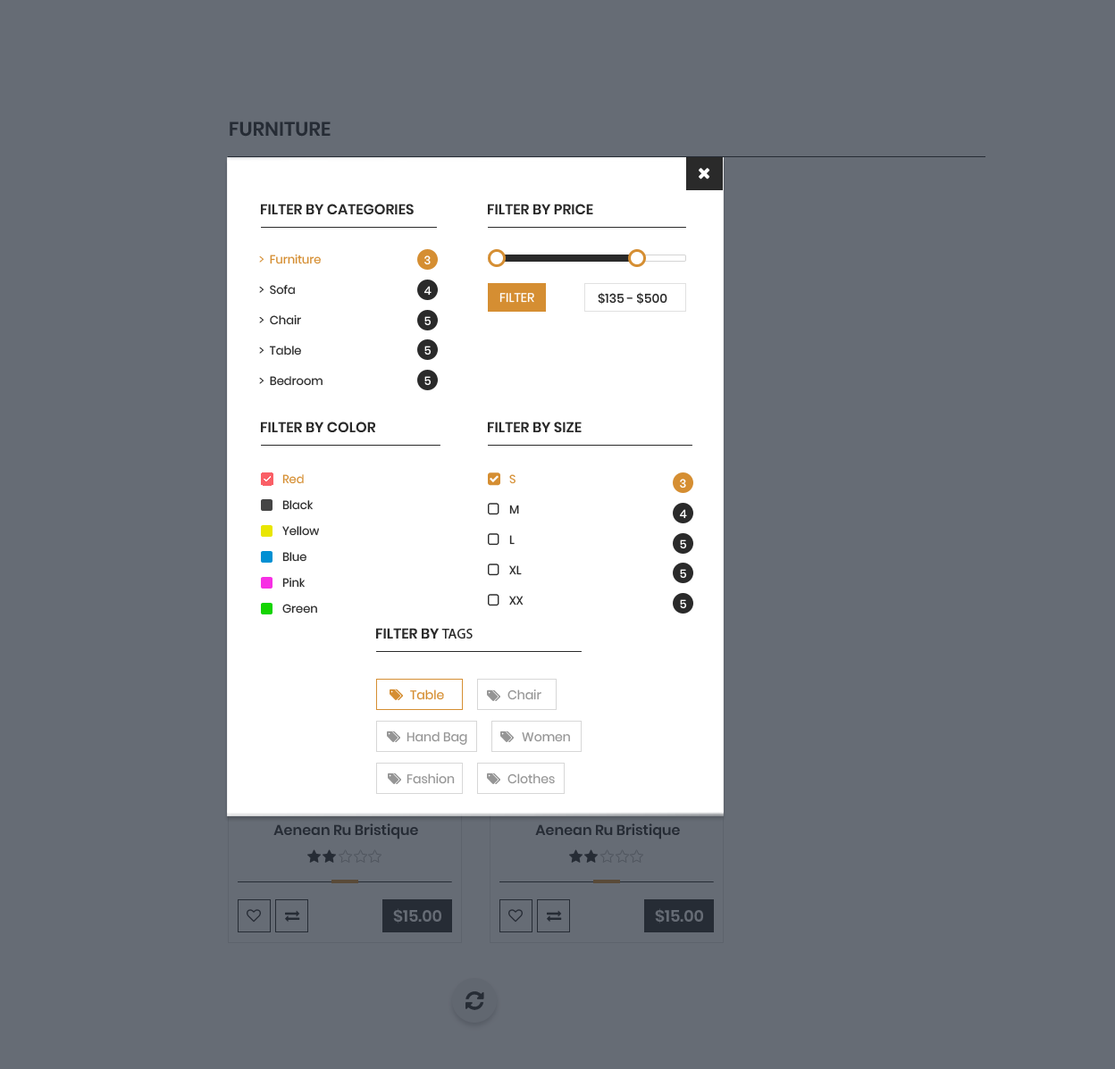
<style>
.page{position:relative;width:1115px;height:1069px;background:#666c75}
.page>*{position:absolute;margin:0}
.t1{font:19.7px "Poppins-SemiBold";color:#2a2a2a;text-transform:uppercase}
.t2{font:14.3px "Poppins-SemiBold";color:#2a2a2a;text-transform:uppercase}
.t3{font:11.6px/30.4px "Poppins-Regular";color:#2a2a2a}
.t4{font:11.6px/30.4px "Poppins-Regular";color:#d58e32}
.t5{font:11.6px "Poppins-Medium";color:#ffffff}
.t6{font:12.5px "Poppins-Regular";color:#ffffff;text-transform:uppercase}
.t7{font:12.5px "Poppins-Medium";color:#2a2a2a}
.t8{font:11.6px/25.9px "Poppins-Regular";color:#2a2a2a}
.t9{font:11.6px/25.9px "Poppins-Regular";color:#d58e32}
.t10{font:14.3px "MyriadPro-Regular";color:#2a2a2a;text-transform:uppercase}
.t11{font:12.5px "Poppins-Regular";color:#d58e32}
.t12{font:12.5px "Poppins-Regular";color:#959595}
.t13{font:14.3px "Poppins-SemiBold";color:#2a2a2a}
.t14{font:16.1px "Poppins-SemiBold";color:#666c75}
</style>
<div class="page">
<p class="t1" style="left:230px;top:122px;width:101px;height:15px">furniture</p>
<p class="t2" style="left:261px;top:204px;width:153px;height:10px">Filter By categories</p>
<p class="t2" style="left:488px;top:204px;width:105px;height:10px">Filter By Price</p>
<p class="t3" style="left:259px;top:254px;width:64px;height:132px"><span class="t4">&gt;  Furniture<br></span>&gt;  Sofa<br>&gt;  Chair<br>&gt;  Table<br>&gt;  Bedroom</p>
<p class="t5" style="left:424px;top:256px;width:7px;height:9px">3</p>
<p class="t5" style="left:423px;top:286px;width:9px;height:10px">4</p>
<p class="t6" style="left:499px;top:293px;width:35px;height:10px">Filter</p>
<p class="t7" style="left:598px;top:292px;width:69px;height:13px">$135 - $500</p>
<p class="t5" style="left:424px;top:316px;width:8px;height:10px">5</p>
<p class="t5" style="left:424px;top:346px;width:8px;height:10px">5</p>
<p class="t5" style="left:424px;top:376px;width:8px;height:10px">5</p>
<p class="t2" style="left:261px;top:422px;width:114px;height:10px">Filter By color</p>
<p class="t2" style="left:488px;top:422px;width:94px;height:10px">Filter By size</p>
<p class="t8" style="left:282px;top:474px;width:37px;height:140px"><span class="t9">Red<br></span>Black<br>Yellow<br>Blue<br>Pink<br>Green</p>
<p class="t3" style="left:509px;top:474px;width:15px;height:132px"><span class="t4">S <br></span>M <br>L <br>XL <br>XX</p>
<p class="t5" style="left:680px;top:479px;width:6px;height:10px">3</p>
<p class="t5" style="left:679px;top:509px;width:8px;height:10px">4</p>
<p class="t5" style="left:680px;top:540px;width:7px;height:9px">5</p>
<p class="t5" style="left:680px;top:569px;width:7px;height:10px">5</p>
<p class="t5" style="left:680px;top:599px;width:7px;height:10px">5</p>
<p class="t2" style="left:376px;top:628px;width:97px;height:11px">Filter By <span class="t10">tags</span></p>
<p class="t11" style="left:410px;top:690px;width:34px;height:10px">Table</p>
<p class="t12" style="left:507px;top:690px;width:34px;height:10px">Chair</p>
<p class="t12" style="left:407px;top:732px;width:60px;height:13px">Hand Bag</p>
<p class="t12" style="left:522px;top:733px;width:48px;height:9px">Women</p>
<p class="t12" style="left:407px;top:774px;width:48px;height:10px">Fashion</p>
<p class="t12" style="left:507px;top:774px;width:48px;height:10px">Clothes</p>
<p class="t13" style="left:273px;top:824px;width:145px;height:16px">Aenean Ru Bristique</p>
<p class="t13" style="left:535px;top:824px;width:145px;height:16px">Aenean Ru Bristique</p>
<p class="t14" style="left:393px;top:909px;width:48px;height:15px">$15.00</p>
<p class="t14" style="left:655px;top:909px;width:48px;height:15px">$15.00</p>
</div>
